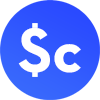
<style>
.page{position:relative;width:100px;height:100px;background:#ffffff}
.page>*{position:absolute;margin:0}
.t1{font:64.1px "NeutraText-Bold";letter-spacing:-0.005em;color:#ffffff}
</style>
<div class="page">
<p class="t1" style="left:18px;top:28px;width:63px;height:45px">Sc</p>
</div>
